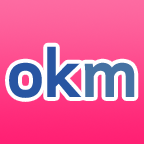
<style>
.page{position:relative;width:144px;height:144px}
.page>*{position:absolute;margin:0}
.t1{font:108px "GalaxiePolaris-Bold";color:#2855a2}
.t2{font:108px "GalaxiePolaris-Bold";color:#4572a3}
</style>
<div class="page">
<p class="t1" style="left:9px;top:46px;width:126px;height:52px">ok<span class="t2">m</span></p>
</div>
